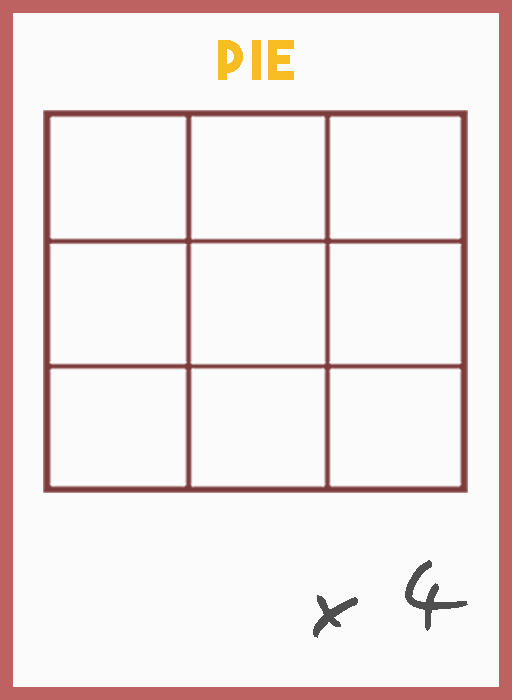
<style>
.page{position:relative;width:512px;height:700px;background:#fbfbfb}
.page>*{position:absolute;margin:0}
.t1{font:54.5px "TheBoldFont";letter-spacing:0.05em;color:#f7bd22}
.t2{font:106.1px "EasySpeech";letter-spacing:0.05em;color:#4f4f4f}
</style>
<div class="page">
<p class="t1" style="left:218px;top:40px;width:76px;height:40px">pie</p>
<p class="t2" style="left:313px;top:560px;width:155px;height:78px">x 4</p>
</div>
